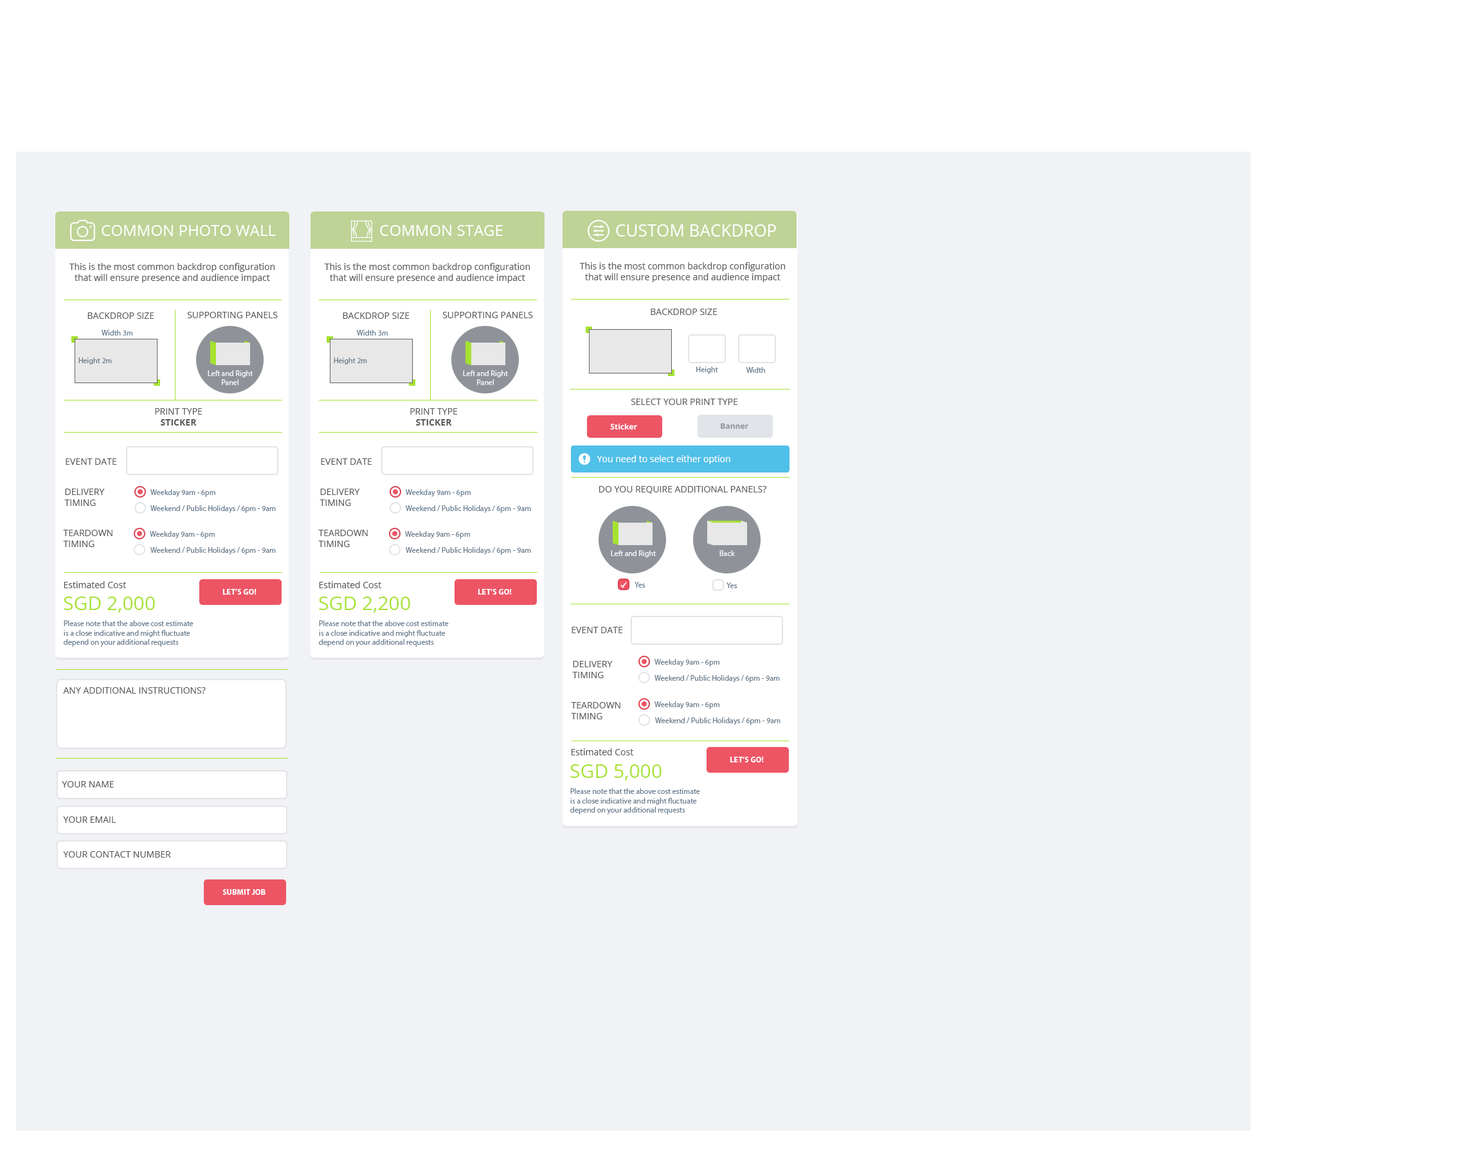
<style>
.page{position:relative;width:1471px;height:1152px;background:#f0f2f5}
.page>*{position:absolute;margin:0}
.t1{font:15.4px "OpenSans-Regular";color:#ffffff}
.t2{font:16.7px "OpenSans-Regular";color:#ffffff}
.t3{font:9px "OpenSans-Regular";color:#5a5a5a}
.t4{font:7.7px "MyriadPro-Regular";color:#6c8092}
.t5{font:7.7px "MyriadPro-Regular";color:#f6f6f8}
.t6{font:9px "OpenSans-Bold";color:#5a5a5a}
.t7{font:7.7px "OpenSans-Bold";color:#ffffff}
.t8{font:7.7px "OpenSans-Bold";color:#8f9399}
.t9{font:9px "OpenSans-Regular";color:#ffffff}
.t10{font:7.7px "MyriadPro-Bold";color:#ffffff;text-transform:uppercase}
.t11{font:19.3px "OpenSans-Regular";color:#a6e231}
</style>
<div class="page">
<p class="t1" style="left:102px;top:225px;width:174px;height:11px">COMMON PHOTO WALL</p>
<p class="t1" style="left:380px;top:225px;width:123px;height:11px">COMMON STAGE</p>
<p class="t2" style="left:616px;top:224px;width:160px;height:13px">CUSTOM BACKDROP</p>
<p class="t3" style="left:69px;top:263px;width:206px;height:20px;text-align:center">This is the most common backdrop configuration that will ensure presence and audience impact</p>
<p class="t3" style="left:324px;top:263px;width:206px;height:20px;text-align:center">This is the most common backdrop configuration that will ensure presence and audience impact</p>
<p class="t3" style="left:579px;top:262px;width:207px;height:20px;text-align:center">This is the most common backdrop configuration that will ensure presence and audience impact</p>
<p class="t3" style="left:87px;top:312px;width:67px;height:7px">BACKDROP SIZE</p>
<p class="t3" style="left:187px;top:312px;width:91px;height:6px">SUPPORTING PANELS</p>
<p class="t3" style="left:343px;top:312px;width:67px;height:7px">BACKDROP SIZE</p>
<p class="t3" style="left:442px;top:312px;width:91px;height:6px">SUPPORTING PANELS</p>
<p class="t3" style="left:651px;top:309px;width:66px;height:6px">BACKDROP SIZE</p>
<p class="t4" style="left:102px;top:330px;width:30px;height:6px">Width 3m</p>
<p class="t4" style="left:357px;top:330px;width:31px;height:6px">Width 3m</p>
<p class="t4" style="left:78px;top:357px;width:34px;height:7px">Height 2m</p>
<p class="t4" style="left:334px;top:357px;width:33px;height:7px">Height 2m</p>
<p class="t5" style="left:208px;top:370px;width:45px;height:15px;text-align:center">Left and Right<br>Panel</p>
<p class="t5" style="left:463px;top:370px;width:45px;height:15px;text-align:center">Left and Right<br>Panel</p>
<p class="t4" style="left:696px;top:366px;width:22px;height:8px">Height</p>
<p class="t4" style="left:746px;top:367px;width:19px;height:6px">Width</p>
<p class="t3" style="left:631px;top:399px;width:107px;height:6px">SELECT YOUR PRINT TYPE</p>
<p class="t3" style="left:155px;top:408px;width:48px;height:18px;text-align:center">PRINT TYPE<br><span class="t6">STICKER</span></p>
<p class="t3" style="left:410px;top:408px;width:48px;height:18px;text-align:center">PRINT TYPE<br><span class="t6">STICKER</span></p>
<p class="t7" style="left:610px;top:423px;width:27px;height:7px">Sticker</p>
<p class="t8" style="left:721px;top:423px;width:27px;height:6px">Banner</p>
<p class="t3" style="left:66px;top:458px;width:51px;height:7px">EVENT DATE</p>
<p class="t3" style="left:321px;top:458px;width:51px;height:7px">EVENT DATE</p>
<p class="t9" style="left:597px;top:455px;width:133px;height:9px">You need to select either option</p>
<p class="t3" style="left:64px;top:489px;width:41px;height:17px">DELIVERY <br>TIMING</p>
<p class="t4" style="left:150px;top:489px;width:65px;height:8px">Weekday 9am - 6pm</p>
<p class="t3" style="left:320px;top:489px;width:40px;height:17px">DELIVERY <br>TIMING</p>
<p class="t4" style="left:406px;top:489px;width:65px;height:8px">Weekday 9am - 6pm</p>
<p class="t3" style="left:599px;top:486px;width:167px;height:8px">DO YOU REQUIRE ADDITIONAL PANELS?</p>
<p class="t4" style="left:150px;top:505px;width:126px;height:8px">Weekend / Public Holidays / 6pm - 9am</p>
<p class="t4" style="left:406px;top:505px;width:125px;height:8px">Weekend / Public Holidays / 6pm - 9am</p>
<p class="t3" style="left:63px;top:530px;width:50px;height:17px">TEARDOWN TIMING</p>
<p class="t4" style="left:150px;top:531px;width:65px;height:8px">Weekday 9am - 6pm</p>
<p class="t3" style="left:318px;top:530px;width:50px;height:17px">TEARDOWN TIMING</p>
<p class="t4" style="left:405px;top:531px;width:65px;height:8px">Weekday 9am - 6pm</p>
<p class="t4" style="left:150px;top:547px;width:126px;height:8px">Weekend / Public Holidays / 6pm - 9am</p>
<p class="t4" style="left:406px;top:547px;width:125px;height:8px">Weekend / Public Holidays / 6pm - 9am</p>
<p class="t5" style="left:611px;top:550px;width:45px;height:7px">Left and Right</p>
<p class="t5" style="left:719px;top:550px;width:16px;height:6px">Back</p>
<p class="t3" style="left:64px;top:581px;width:62px;height:7px">Estimated Cost</p>
<p class="t3" style="left:319px;top:581px;width:62px;height:7px">Estimated Cost</p>
<p class="t4" style="left:634px;top:582px;width:11px;height:6px">Yes</p>
<p class="t10" style="left:222px;top:589px;width:34px;height:6px">LET’S GO!</p>
<p class="t10" style="left:478px;top:589px;width:34px;height:6px">LET’S GO!</p>
<p class="t4" style="left:726px;top:582px;width:11px;height:6px">Yes</p>
<p class="t11" style="left:64px;top:597px;width:91px;height:16px">SGD 2,000</p>
<p class="t11" style="left:319px;top:597px;width:91px;height:16px">SGD 2,200</p>
<p class="t4" style="left:64px;top:620px;width:130px;height:27px">Please note that the above cost estimate is a close indicative and might fluctuate depend on your additional requests</p>
<p class="t4" style="left:319px;top:620px;width:130px;height:27px">Please note that the above cost estimate is a close indicative and might fluctuate depend on your additional requests</p>
<p class="t3" style="left:572px;top:627px;width:51px;height:6px">EVENT DATE</p>
<p class="t3" style="left:572px;top:661px;width:41px;height:17px">DELIVERY <br>TIMING</p>
<p class="t4" style="left:654px;top:659px;width:65px;height:8px">Weekday 9am - 6pm</p>
<p class="t4" style="left:654px;top:675px;width:126px;height:8px">Weekend / Public Holidays / 6pm - 9am</p>
<p class="t3" style="left:63px;top:687px;width:143px;height:7px">ANY ADDITIONAL INSTRUCTIONS?</p>
<p class="t3" style="left:571px;top:702px;width:49px;height:17px">TEARDOWN TIMING</p>
<p class="t4" style="left:654px;top:701px;width:65px;height:8px">Weekday 9am - 6pm</p>
<p class="t4" style="left:655px;top:717px;width:125px;height:8px">Weekend / Public Holidays / 6pm - 9am</p>
<p class="t3" style="left:571px;top:748px;width:62px;height:7px">Estimated Cost</p>
<p class="t10" style="left:730px;top:757px;width:34px;height:5px">LET’S GO!</p>
<p class="t11" style="left:570px;top:764px;width:92px;height:16px">SGD 5,000</p>
<p class="t3" style="left:62px;top:781px;width:52px;height:7px">YOUR NAME</p>
<p class="t4" style="left:570px;top:788px;width:130px;height:27px">Please note that the above cost estimate is a close indicative and might fluctuate depend on your additional requests</p>
<p class="t3" style="left:63px;top:816px;width:53px;height:7px">YOUR EMAIL</p>
<p class="t3" style="left:63px;top:851px;width:108px;height:7px">YOUR CONTACT NUMBER</p>
<p class="t10" style="left:222px;top:889px;width:44px;height:6px">submit job</p>
</div>
